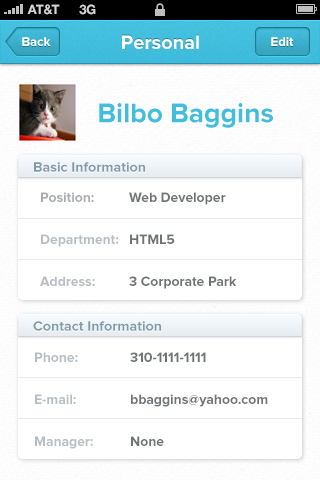
<style>
.page{position:relative;width:320px;height:480px;background:#ffffff}
.page>*{position:absolute;margin:0}
.t1{font:13px "HelveticaNeue-Bold";color:#d4d4d4;text-transform:uppercase}
.t2{font:13px "ProximaNova-Bold";color:#ffffff}
.t3{font:20px "ProximaNova-Bold";color:#ffffff}
.t4{font:28px "ProximaNova-Bold";color:#41bedd}
.t5{font:14px "ProximaNova-Bold";color:#7f9ba9}
.t6{font:14px/42px "ProximaNova-Bold";color:#b6bdc3}
.t7{font:14px/42px "ProximaNova-Bold";color:#a6acb2}
.t8{font:14px/42px "ProximaNova-Bold";color:#6f7276}
</style>
<div class="page">
<p class="t1" style="left:27px;top:4px;width:33px;height:11px">AT&amp;t</p>
<p class="t1" style="left:79px;top:4px;width:17px;height:11px">3G</p>
<p class="t2" style="left:22px;top:37px;width:29px;height:9px">Back</p>
<p class="t3" style="left:122px;top:35px;width:77px;height:14px">Personal</p>
<p class="t2" style="left:271px;top:37px;width:23px;height:9px">Edit</p>
<p class="t4" style="left:99px;top:103px;width:174px;height:25px">Bilbo Baggins</p>
<p class="t5" style="left:34px;top:162px;width:111px;height:10px">Basic Information</p>
<p class="t6" style="left:40px;top:192px;width:79px;height:94px"><span class="t7">Position:<br></span>Department:<br>Address:</p>
<p class="t8" style="left:129px;top:192px;width:108px;height:97px">Web Developer<br>HTML5<br>3 Corporate Park</p>
<p class="t5" style="left:33px;top:321px;width:128px;height:10px">Contact Information</p>
<p class="t6" style="left:35px;top:352px;width:58px;height:97px">Phone:<br>E-mail:<br>Manager:</p>
<p class="t8" style="left:130px;top:352px;width:138px;height:94px">310-1111-1111<br>bbaggins@yahoo.com<br>None</p>
</div>
